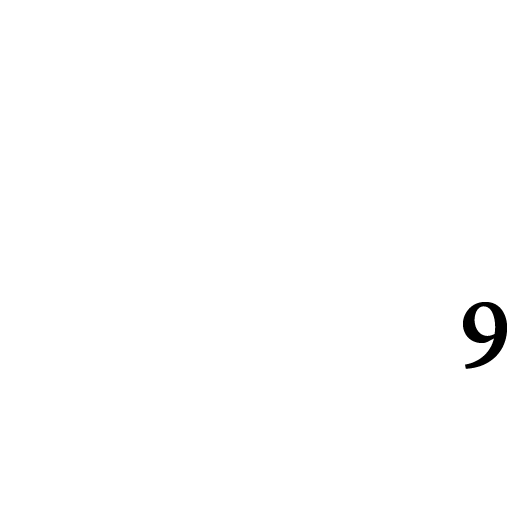
<style>
.page{position:relative;width:512px;height:512px;background:#ffffff}
.page>*{position:absolute;margin:0}
.t1{font:112px "AdobeGurmukhi-Bold";color:#000000}
</style>
<div class="page">
<p class="t1" style="left:463px;top:302px;width:44px;height:67px">9</p>
</div>
